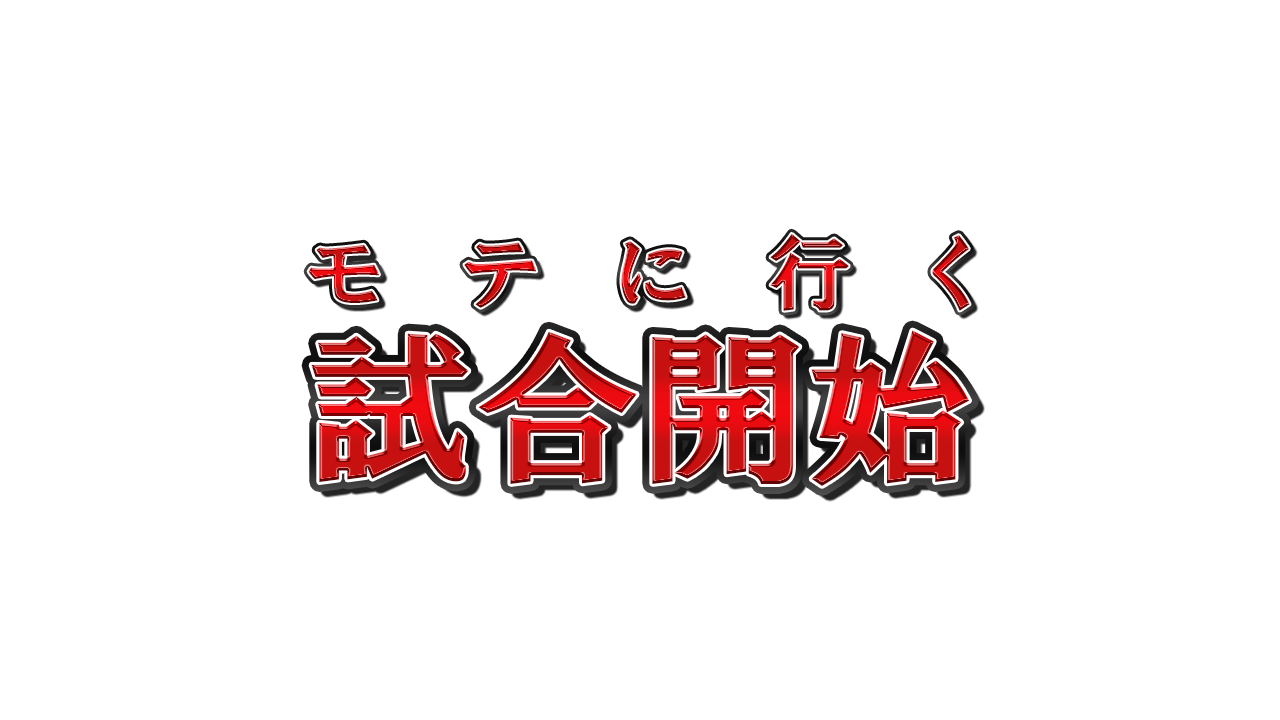
<style>
.page{position:relative;width:1280px;height:720px;background:#ffffff}
.page>*{position:absolute;margin:0}
.t1{font:83.2px "HGPSoeiPresenceEB";letter-spacing:0.94em}
.t2{font:166.5px "HGPSoeiPresenceEB"}
</style>
<div class="page">
<p class="t1" style="left:308px;top:233px;width:662px;height:78px">モテに行く</p>
<p class="t2" style="left:311px;top:330px;width:659px;height:156px">試合開始</p>
</div>
